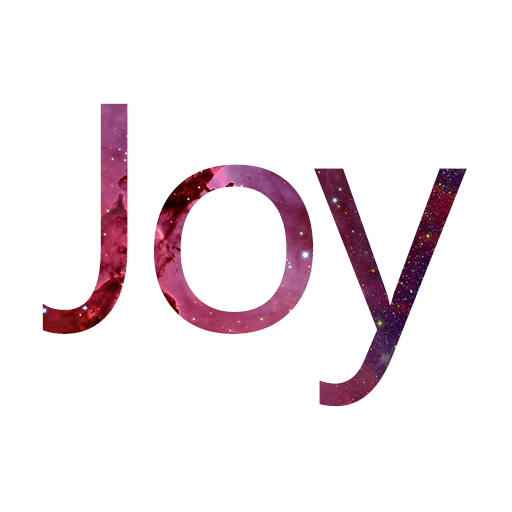
<style>
.page{position:relative;width:512px;height:512px;background:#ffffff}
.page>*{position:absolute;margin:0}
.t1{font:323px "SegoeUI";letter-spacing:-0.05em}
</style>
<div class="page">
<p class="t1" style="left:42px;top:103px;width:425px;height:304px">Joy</p>
</div>
